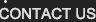
<style>
.page{position:relative;width:96px;height:22px;background:#232323}
.page>*{position:absolute;margin:0}
.t1{font:15px "ArialMT";color:#dfdfdf}
</style>
<div class="page">
<p class="t1" style="left:0px;top:7px;width:96px;height:13px">CONTACT US</p>
<p class="t1" style="left:0px;top:7px;width:96px;height:13px">CONTACT US</p>
</div>
